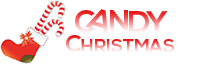
<style>
.page{position:relative;width:200px;height:64px;background:#ffffff}
.page>*{position:absolute;margin:0}
.t1{font:31px "NexaBold"}
.t2{font:24px "NexaBold"}
.t3{font:18px "NexaBold"}
</style>
<div class="page">
<p class="t1" style="left:75px;top:10px;width:20px;height:23px">C</p>
<p class="t1" style="left:85px;top:9px;width:23px;height:26px;rotate:18deg">A</p>
<p class="t1" style="left:110px;top:10px;width:18px;height:22px">N</p>
<p class="t1" style="left:129px;top:11px;width:20px;height:22px">D</p>
<p class="t1" style="left:146px;top:11px;width:22px;height:22px;rotate:-1deg">Y</p>
<p class="t2" style="left:66px;top:35px;width:16px;height:17px">C</p>
<p class="t3" style="left:81px;top:39px;width:12px;height:13px">H</p>
<p class="t3" style="left:95px;top:39px;width:79px;height:13px">RISTMAS</p>
</div>
